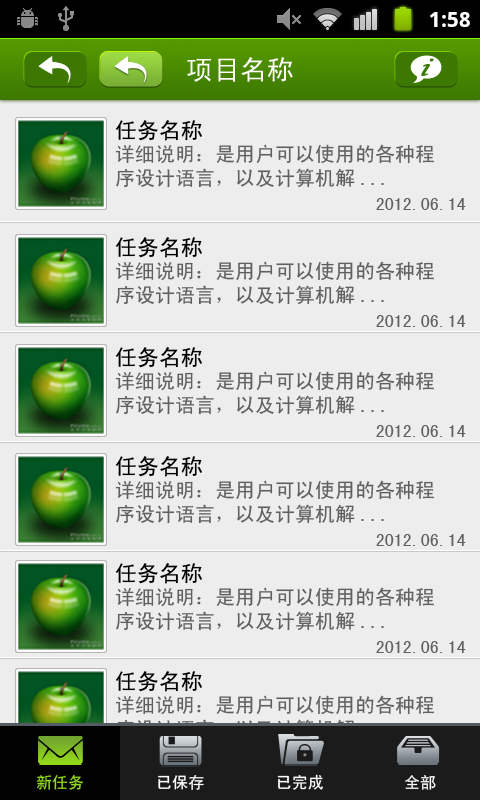
<style>
.page{position:relative;width:480px;height:800px;background:#eeeded}
.page>*{position:absolute;margin:0}
.t1{font:27px "SimHei";color:#ffffff}
.t2{font:30.1px "MonotypeCorsiva";color:#3d7902;font-weight:bold}
.t3{font:22px "SimHei";color:#010000}
.t4{font:20px/23.8px "SimHei";color:#606060}
.t5{font:18px "SimHei";color:#606060}
.t6{font:16px "SimHei";color:#ffffff}
.t7{font:16px "SimHei";color:#94db1c}
</style>
<div class="page">
<p class="t1" style="left:187px;top:57px;width:106px;height:25px">项目名称</p>
<p class="t2" style="left:421px;top:58px;width:13px;height:18px;rotate:16deg">i</p>
<p class="t3" style="left:115px;top:120px;width:87px;height:21px">任务名称</p>
<p class="t4" style="left:115px;top:144px;width:319px;height:44px">详细说明：是用户可以使用的各种程<br>序设计语言，以及计算机解...</p>
<p class="t5" style="left:376px;top:198px;width:90px;height:12px">2012.06.14</p>
<p class="t3" style="left:115px;top:237px;width:87px;height:21px">任务名称</p>
<p class="t4" style="left:115px;top:261px;width:319px;height:44px">详细说明：是用户可以使用的各种程<br>序设计语言，以及计算机解...</p>
<p class="t5" style="left:376px;top:315px;width:90px;height:12px">2012.06.14</p>
<p class="t3" style="left:115px;top:347px;width:87px;height:21px">任务名称</p>
<p class="t4" style="left:115px;top:371px;width:319px;height:44px">详细说明：是用户可以使用的各种程<br>序设计语言，以及计算机解...</p>
<p class="t5" style="left:376px;top:425px;width:90px;height:12px">2012.06.14</p>
<p class="t3" style="left:115px;top:456px;width:87px;height:21px">任务名称</p>
<p class="t4" style="left:115px;top:480px;width:319px;height:44px">详细说明：是用户可以使用的各种程<br>序设计语言，以及计算机解...</p>
<p class="t5" style="left:376px;top:534px;width:90px;height:12px">2012.06.14</p>
<p class="t3" style="left:115px;top:563px;width:87px;height:21px">任务名称</p>
<p class="t4" style="left:115px;top:587px;width:319px;height:44px">详细说明：是用户可以使用的各种程<br>序设计语言，以及计算机解...</p>
<p class="t5" style="left:376px;top:641px;width:90px;height:12px">2012.06.14</p>
<p class="t3" style="left:115px;top:671px;width:87px;height:21px">任务名称</p>
<p class="t4" style="left:115px;top:695px;width:319px;height:44px">详细说明：是用户可以使用的各种程<br>序设计语言，以及计算机解...</p>
<p class="t6" style="left:277px;top:774px;width:46px;height:16px">已完成</p>
<p class="t7" style="left:36px;top:775px;width:47px;height:15px">新任务</p>
<p class="t6" style="left:158px;top:775px;width:46px;height:15px">已保存</p>
<p class="t6" style="left:405px;top:775px;width:31px;height:15px">全部</p>
</div>
